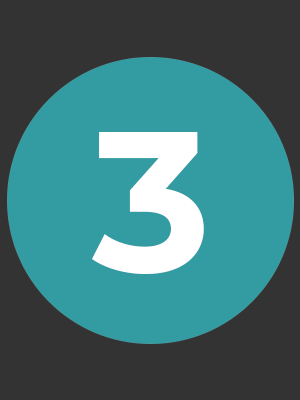
<style>
.page{position:relative;width:300px;height:400px;background:#329ca2}
.page>*{position:absolute;margin:0}
.t1{font:200.4px "Montserrat-Bold";color:#ffffff;text-transform:uppercase}
</style>
<div class="page">
<p class="t1" style="left:92px;top:132px;width:112px;height:142px">3</p>
</div>
